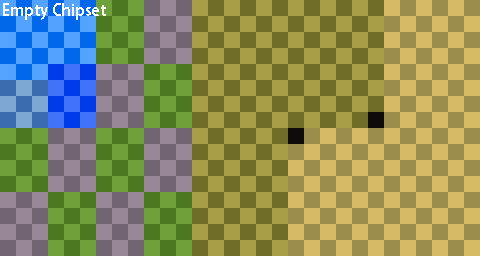
<style>
.page{position:relative;width:480px;height:256px}
.page>*{position:absolute;margin:0}
.t1{font:16px "KozGoPr6N-Bold";color:#ffffff}
</style>
<div class="page">
<p class="t1" style="left:3px;top:3px;width:103px;height:17px">Empty Chipset</p>
</div>
